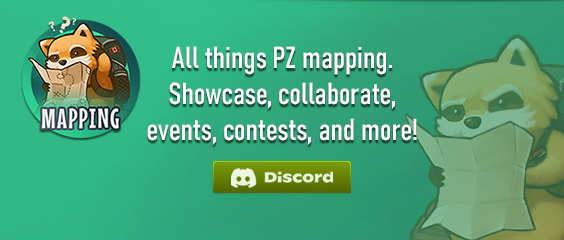
<style>
.page{position:relative;width:564px;height:240px}
.page>*{position:absolute;margin:0}
.t1{font:30px "Bahnschrift-Condensed";color:#ffffff;font-weight:bold}
</style>
<div class="page">
<p class="t1" style="left:147px;top:46px;width:270px;height:99px;text-align:center">All things PZ mapping.<br>Showcase, collaborate, <br>events, contests, and more!</p>
</div>
